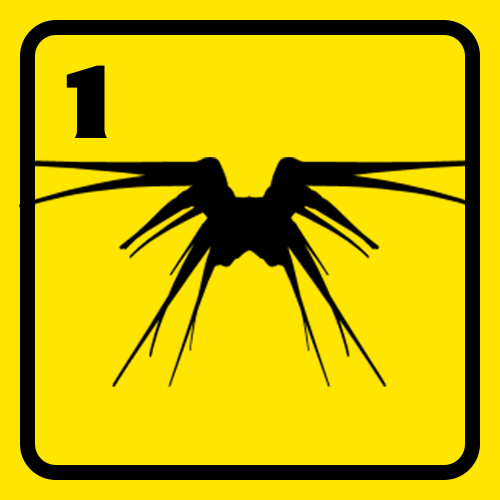
<style>
.page{position:relative;width:500px;height:500px;background:#ffe600}
.page>*{position:absolute;margin:0}
.t1{font:113px "Babylon5";color:#000000}
</style>
<div class="page">
<p class="t1" style="left:66px;top:65px;width:42px;height:73px">1</p>
</div>
